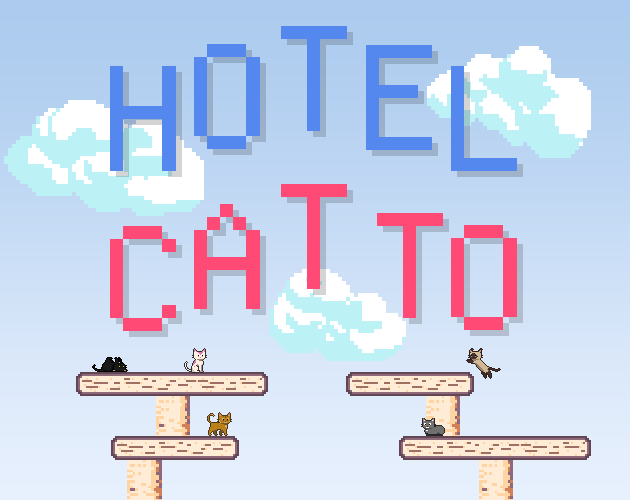
<style>
.page{position:relative;width:630px;height:500px}
.page>*{position:absolute;margin:0}
.t1{font:144px "DepartureMono-Regular";color:#5588ee}
.t2{font:144px "DepartureMono-Regular";color:#ff4a75}
</style>
<div class="page">
<p class="t1" style="left:281px;top:26px;width:66px;height:105px">T</p>
<p class="t1" style="left:194px;top:44px;width:66px;height:105px">O</p>
<p class="t1" style="left:366px;top:45px;width:66px;height:105px">E</p>
<p class="t1" style="left:110px;top:66px;width:66px;height:105px">H</p>
<p class="t1" style="left:451px;top:66px;width:66px;height:105px">L</p>
<p class="t2" style="left:281px;top:184px;width:66px;height:105px">T</p>
<p class="t2" style="left:194px;top:204px;width:66px;height:105px">A</p>
<p class="t2" style="left:377px;top:213px;width:66px;height:105px">T</p>
<p class="t2" style="left:110px;top:226px;width:66px;height:105px">C</p>
<p class="t2" style="left:451px;top:225px;width:66px;height:105px">O</p>
</div>
